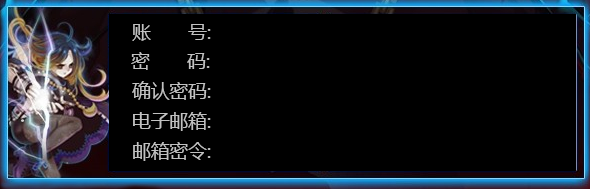
<style>
.page{position:relative;width:590px;height:189px;background:#000000}
.page>*{position:absolute;margin:0}
.t1{font:18.7px "MicrosoftYaHei";color:#c1c1c1}
</style>
<div class="page">
<p class="t1" style="left:132px;top:24px;width:79px;height:17px">账　　号:</p>
<p class="t1" style="left:131px;top:52px;width:79px;height:18px">密　　码:</p>
<p class="t1" style="left:132px;top:81px;width:79px;height:19px">确认密码:</p>
<p class="t1" style="left:133px;top:112px;width:78px;height:19px">电子邮箱:</p>
<p class="t1" style="left:133px;top:142px;width:78px;height:19px">邮箱密令:</p>
</div>
